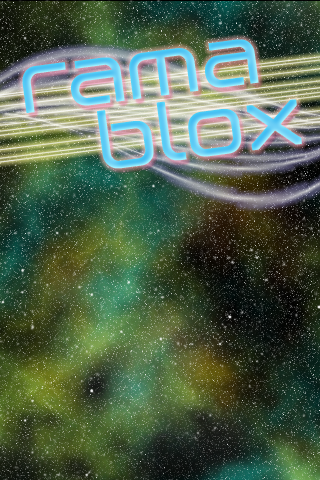
<style>
.page{position:relative;width:320px;height:480px}
.page>*{position:absolute;margin:0}
.t1{font:75px/66.7px "Birdman";font-weight:bold}
</style>
<div class="page">
<p class="t1" style="left:22px;top:39px;width:280px;height:130px;rotate:-8deg">rama<br>  blox</p>
</div>
